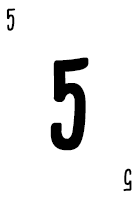
<style>
.page{position:relative;width:140px;height:200px;background:#ffffff}
.page>*{position:absolute;margin:0}
.t1{font:28.7px "CardenioModern-Reg";letter-spacing:-0.1em;color:#000000;text-transform:uppercase;font-weight:bold;scale:0.87 1}
.t2{font:115px "CardenioModern-Bold";letter-spacing:-0.1em;color:#000000;text-transform:uppercase;font-weight:bold;scale:0.87 1}
</style>
<div class="page">
<p class="t1" style="left:6px;top:8px;width:10px;height:23px">5</p>
<p class="t2" style="left:50px;top:57px;width:39px;height:94px">5</p>
<p class="t1" style="left:123px;top:168px;width:9px;height:24px;rotate:180deg">5</p>
</div>
